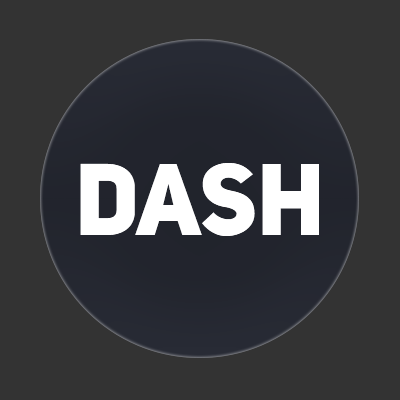
<style>
.page{position:relative;width:400px;height:400px;background:#333333}
.page>*{position:absolute;margin:0}
.t1{font:100px "UniSansHeavyCAPS";color:#ffffff}
</style>
<div class="page">
<p class="t1" style="left:80px;top:163px;width:239px;height:73px">DASH</p>
</div>
